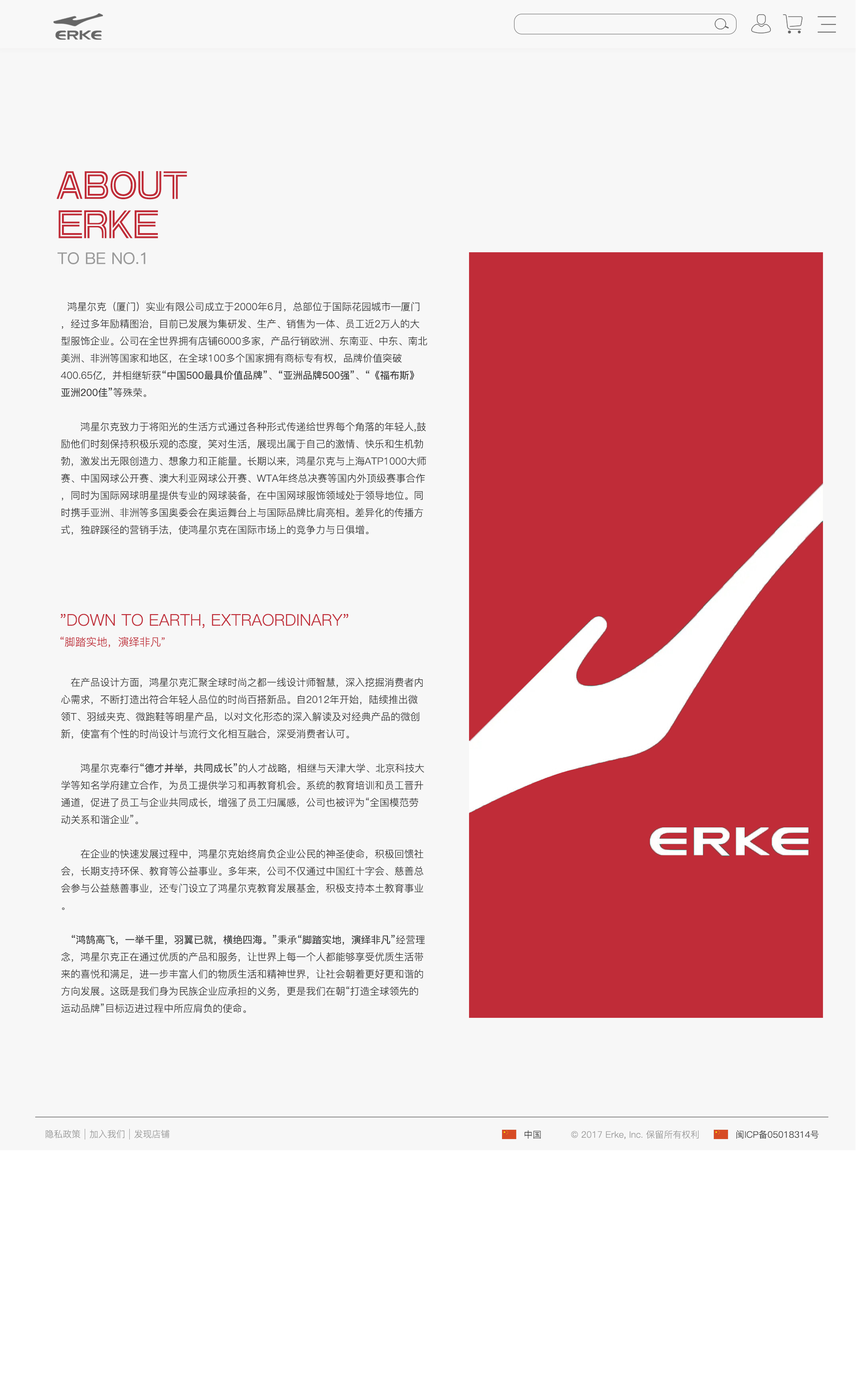
<style>
.page{position:relative;width:856px;height:1394px;background:#f7f7f7}
.page>*{position:absolute;margin:0}
.t1{font:40.1px "HYb7gf";color:#c02c38}
.t2{font:16px "PingFang-SC-Medium";color:#999999}
.t3{font:9.8px "PingFang-SC-Regular";color:#333333}
.t4{font:9.8px "PingFang-SC-Medium";color:#333333}
.t5{font:16px "PingFang-SC-Regular";color:#c02c38}
.t6{font:10.7px "PingFang-SC-Regular";color:#c02c38}
.t7{font:9.8px "PingFang-SC-Regular";color:#c02c38}
.t8{font:8.9px "PingFang-SC-Regular";color:#999999}
.t9{font:8.9px "PingFang-SC-Regular";color:#333333}
</style>
<div class="page">
<p class="t1" style="left:57px;top:171px;width:130px;height:29px">ABOUT</p>
<p class="t1" style="left:58px;top:210px;width:100px;height:28px">ERKE</p>
<p class="t2" style="left:57px;top:252px;width:88px;height:12px">TO BE NO.1</p>
<p class="t3" style="left:61px;top:302px;width:366px;height:233px">鸿星尔克（厦门）实业有限公司成立于2000年6月，总部位于国际花园城市—厦门，经过多年励精图治，目前已发展为集研发、生产、销售为一体、员工近2万人的大型服饰企业。公司在全世界拥有店铺6000多家，产品行销欧洲、东南亚、中东、南北美洲、非洲等国家和地区，在全球100多个国家拥有商标专有权，品牌价值突破400.65亿，并相继斩获<span class="t4">“中国500最具价值品牌”</span>、<span class="t4">“亚洲品牌500强”</span>、<span class="t4">“《福布斯》亚洲200佳”</span>等殊荣。<br><br>　　鸿星尔克致力于将阳光的生活方式通过各种形式传递给世界每个角落的年轻人,鼓励他们时刻保持积极乐观的态度，笑对生活，展现出属于自己的激情、快乐和生机勃勃，激发出无限创造力、想象力和正能量。长期以来，鸿星尔克与上海ATP1000大师赛、中国网球公开赛、澳大利亚网球公开赛、WTA年终总决赛等国内外顶级赛事合作，同时为国际网球明星提供专业的网球装备，在中国网球服饰领域处于领导地位。同时携手亚洲、非洲等多国奥委会在奥运舞台上与国际品牌比肩亮相。差异化的传播方式，独辟蹊径的营销手法，使鸿星尔克在国际市场上的竞争力与日俱增。</p>
<p class="t5" style="left:61px;top:614px;width:287px;height:14px">"DOWN TO EARTH, EXTRAORDINARY"</p>
<p class="t6" style="left:60px;top:636px;width:105px;height:11px">“脚踏实地，演绎非凡<span class="t7">”</span></p>
<p class="t3" style="left:61px;top:677px;width:364px;height:336px">在产品设计方面，鸿星尔克汇聚全球时尚之都一线设计师智慧，深入挖掘消费者内心需求，不断打造出符合年轻人品位的时尚百搭新品。自2012年开始，陆续推出微领T、羽绒夹克、微跑鞋等明星产品，以对文化形态的深入解读及对经典产品的微创新，使富有个性的时尚设计与流行文化相互融合，深受消费者认可。<br><br>　　鸿星尔克奉行<span class="t4">“德才并举，共同成长”</span>的人才战略，相继与天津大学、北京科技大学等知名学府建立合作，为员工提供学习和再教育机会。系统的教育培训和员工晋升通道，促进了员工与企业共同成长，增强了员工归属感，公司也被评为“全国模范劳动关系和谐企业”。<br><br>　　在企业的快速发展过程中，鸿星尔克始终肩负企业公民的神圣使命，积极回馈社会，长期支持环保、教育等公益事业。多年来，公司不仅通过中国红十字会、慈善总会参与公益慈善事业，还专门设立了鸿星尔克教育发展基金，积极支持本土教育事业。<br><br><span class="t4">　“鸿鹄高飞，一举千里，羽翼已就，横绝四海。”</span>秉承<span class="t4">“脚踏实地，演绎非凡”</span>经营理念，鸿星尔克正在通过优质的产品和服务，让世界上每一个人都能够享受优质生活带来的喜悦和满足，进一步丰富人们的物质生活和精神世界，让社会朝着更好更和谐的方向发展。这既是我们身为民族企业应承担的义务，更是我们在朝“打造全球领先的运动品牌”目标迈进过程中所应肩负的使命。</p>
<p class="t8" style="left:45px;top:1130px;width:35px;height:8px">隐私政策</p>
<p class="t8" style="left:90px;top:1130px;width:34px;height:8px">加入我们</p>
<p class="t8" style="left:134px;top:1130px;width:35px;height:8px">发现店铺</p>
<p class="t9" style="left:524px;top:1130px;width:16px;height:8px">中国</p>
<p class="t8" style="left:571px;top:1130px;width:127px;height:9px">© 2017 Erke, Inc. 保留所有权利</p>
<p class="t9" style="left:736px;top:1130px;width:83px;height:8px">闽ICP备05018314号</p>
</div>
